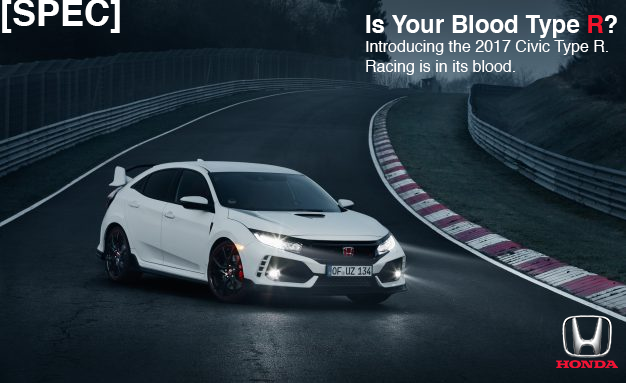
<style>
.page{position:relative;width:626px;height:383px}
.page>*{position:absolute;margin:0}
.t1{font:36px "Helvetica-Bold";color:#ffffff}
.t2{font:16px "Helvetica";color:#ffffff}
.t3{font:24px "Helvetica-Bold";color:#ffffff}
.t4{font:24px "Helvetica-Bold";color:#f2142b}
</style>
<div class="page">
<p class="t1" style="left:2px;top:0px;width:118px;height:33px">[SPEC]</p>
<p class="t2" style="left:366px;top:15px;width:251px;height:60px"><span class="t3">Is Your Blood Type </span><span class="t4">R</span><span class="t3">?<br></span>Introducing the 2017 Civic Type R.<br>Racing is in its blood.</p>
</div>
